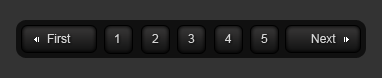
<style>
.page{position:relative;width:382px;height:78px;background:#333333}
.page>*{position:absolute;margin:0}
.t1{font:12px "ArialMT";color:#d5d5d5}
</style>
<div class="page">
<p class="t1" style="left:47px;top:34px;width:24px;height:9px">First</p>
<p class="t1" style="left:115px;top:34px;width:4px;height:9px">1</p>
<p class="t1" style="left:152px;top:34px;width:7px;height:9px">2</p>
<p class="t1" style="left:188px;top:34px;width:7px;height:9px">3</p>
<p class="t1" style="left:225px;top:34px;width:7px;height:9px">4</p>
<p class="t1" style="left:261px;top:34px;width:7px;height:9px">5</p>
<p class="t1" style="left:311px;top:34px;width:25px;height:9px">Next</p>
</div>
